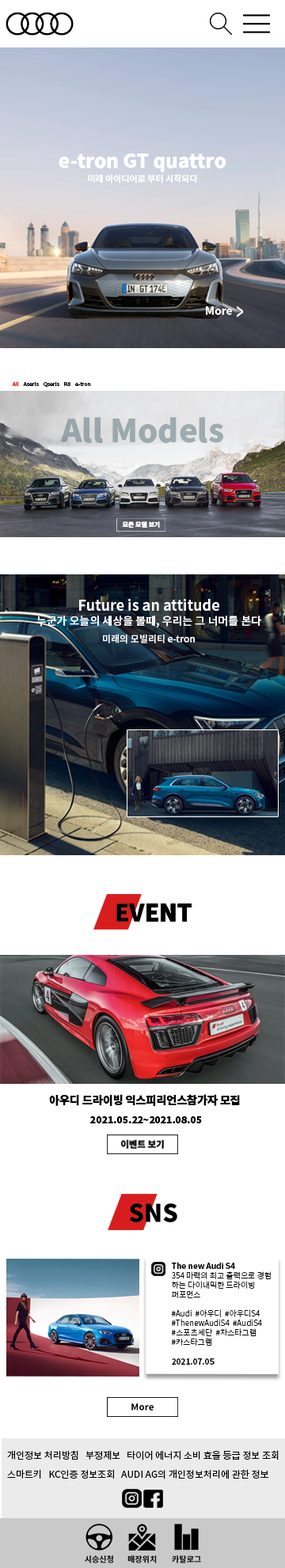
<style>
.page{position:relative;width:285px;height:1568px;background:#ffffff}
.page>*{position:absolute;margin:0}
.t1{font:19px/14.2px "NotoSansKR-Black";color:#ffffff}
.t2{font:8.7px/14.2px "NotoSansKR-Bold";color:#ffffff}
.t3{font:23.8px "NotoSansKR-Medium";color:#ffffff;scale:0.52 1}
.t4{font:11.1px "NotoSansKR-Bold";color:#ffffff}
.t5{font:5.1px "NotoSansKR-Bold";color:#000000}
.t6{font:5.1px "NotoSansKR-Bold";color:#d81d1f}
.t7{font:31.5px "NotoSansKR-Black";color:#9ca9ae}
.t8{font:6.2px "NotoSansKR-Black";color:#ffffff}
.t9{font:11.1px/14.2px "NotoSansKR-Bold";color:#ffffff}
.t10{font:14.2px/14.2px "NotoSansKR-Bold";color:#ffffff}
.t11{font:9.5px/7.9px "NotoSansKR-Medium";color:#ffffff}
.t12{font:11.1px/9.5px "NotoSansKR-Black";color:#010101}
.t13{font:9.5px/9.5px "NotoSansKR-Black";color:#010101}
.t14{font:7.9px "NotoSansKR-Light";color:#000000}
.t15{font:7.9px "NotoSansKR-Bold";color:#000000}
.t16{font:8.7px "NotoSansKR-Bold";color:#000000}
.t17{font:9.5px/19px "NotoSansKR-Regular";color:#000000}
</style>
<div class="page">
<p class="t1" style="left:59px;top:153px;width:167px;height:31px;text-align:center">e-tron GT quattro<br><span class="t2">미래 아이디어로 부터 시작되다</span></p>
<p class="t3" style="left:237px;top:305px;width:6px;height:12px">&gt;</p>
<p class="t4" style="left:206px;top:306px;width:26px;height:9px">More</p>
<p class="t5" style="left:12px;top:381px;width:79px;height:6px"><span class="t6">All</span>    Aseris    Qseris    R8    e-tron</p>
<p class="t7" style="left:60px;top:417px;width:163px;height:26px">All Models</p>
<p class="t8" style="left:122px;top:521px;width:38px;height:7px">모든 모델 보기</p>
<p class="t9" style="left:36px;top:599px;width:225px;height:45px;text-align:center"><span class="t10">Future is an attitude<br></span>누군가 오늘의 세상을 볼때, 우리는 그 너머를 본다<br><br><span class="t11">미래의 모빌리티 e-tron</span></p>
<p class="t12" style="left:49px;top:1094px;width:191px;height:29px;text-align:center">아우디 드라이빙 익스피리언스참가자 모집 <br><br><span class="t13">2021.05.22~2021.08.05</span></p>
<p class="t14" style="left:171px;top:1262px;width:100px;height:103px"><span class="t15">The new Audi S4 <br></span>354 마력의 최고 출력으로 경험<br>하는 다이내믹한 드라이빙 <br>퍼포먼스<br><br>#Audi  #아우디  #아우디S4  <br>#ThenewAudiS4  #AudiS4<br>#스포츠세단  #차스타그램 <br>#카스타그램    <br> <br><span class="t15">2021.07.0</span><span class="t16">5</span></p>
<p class="t17" style="left:7px;top:1450px;width:271px;height:29px">개인정보 처리방침   부정제보   타이어 에너지 소비 효율 등급 정보 조회<br>스마트키   KC인증 정보조회   AUDI AG의 개인정보처리에 관한 정보</p>
</div>
